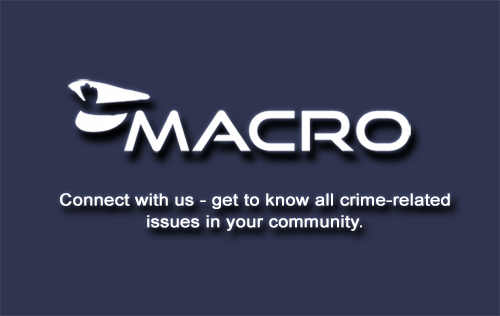
<style>
.page{position:relative;width:500px;height:316px;background:#2f354e}
.page>*{position:absolute;margin:0}
.t1{font:16.2px "ArialMT";color:#ffffff;font-weight:bold;scale:1.11 1}
</style>
<div class="page">
<p class="t1" style="left:60px;top:193px;width:390px;height:38px;text-align:center">Connect with us - get to know all crime-related issues in your community.</p>
</div>
